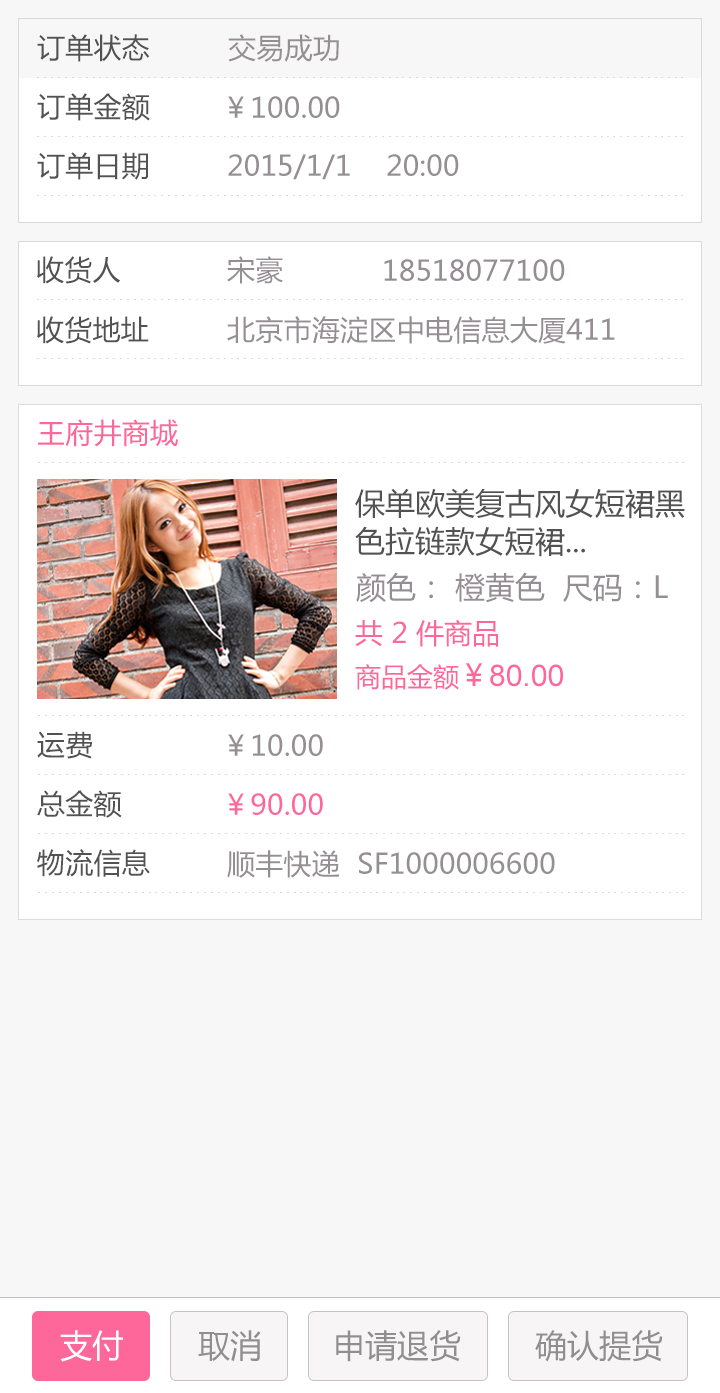
<style>
.page{position:relative;width:720px;height:1393px;background:#ffffff}
.page>*{position:absolute;margin:0}
.t1{font:28px "MicrosoftYaHei";letter-spacing:0.01em;color:#525252}
.t2{font:28px "MicrosoftYaHei";letter-spacing:0.01em;color:#958f93}
.t3{font:28px "MicrosoftYaHei";letter-spacing:0.01em;color:#fd679a}
.t4{font:30px/38px "MicrosoftYaHei";color:#525252}
.t5{font:30px "MicrosoftYaHei";color:#958f93}
.t6{font:28px "MicrosoftYaHei";color:#fd679a}
.t7{font:30px "ArialMT";color:#fd679a}
.t8{font:26px "MicrosoftYaHei";color:#fd679a}
.t9{font:30px "MicrosoftYaHei";color:#fd679a}
.t10{font:32px "MicrosoftYaHei";color:#ffffff}
.t11{font:32px "MicrosoftYaHei";color:#8f8f8f}
</style>
<div class="page">
<p class="t1" style="left:37px;top:34px;width:113px;height:28px">订单状态</p>
<p class="t2" style="left:228px;top:34px;width:111px;height:28px">交易成功</p>
<p class="t1" style="left:37px;top:93px;width:113px;height:28px">订单金额</p>
<p class="t2" style="left:228px;top:96px;width:112px;height:22px">￥100.00</p>
<p class="t1" style="left:37px;top:152px;width:111px;height:28px">订单日期</p>
<p class="t2" style="left:228px;top:154px;width:231px;height:26px">2015/1/1    20:00</p>
<p class="t1" style="left:37px;top:256px;width:84px;height:28px">收货人</p>
<p class="t2" style="left:227px;top:256px;width:56px;height:28px">宋豪</p>
<p class="t2" style="left:384px;top:259px;width:181px;height:22px">18518077100</p>
<p class="t1" style="left:37px;top:316px;width:112px;height:28px">收货地址</p>
<p class="t2" style="left:227px;top:316px;width:388px;height:28px">北京市海淀区中电信息大厦411</p>
<p class="t3" style="left:38px;top:419px;width:140px;height:28px">王府井商城</p>
<p class="t4" style="left:355px;top:488px;width:330px;height:69px">保单欧美复古风女短裙黑<br>色拉链款女短裙...</p>
<p class="t5" style="left:356px;top:572px;width:312px;height:31px">颜色： 橙黄色  尺码：L</p>
<p class="t6" style="left:355px;top:619px;width:143px;height:28px">共 2 件商品</p>
<p class="t7" style="left:355px;top:663px;width:208px;height:27px"><span class="t8">商品金额</span><span class="t9">￥</span>80.00</p>
<p class="t1" style="left:37px;top:731px;width:55px;height:28px">运费</p>
<p class="t2" style="left:228px;top:734px;width:95px;height:22px">￥10.00</p>
<p class="t1" style="left:37px;top:790px;width:85px;height:28px">总金额</p>
<p class="t3" style="left:228px;top:793px;width:95px;height:22px">￥90.00</p>
<p class="t1" style="left:37px;top:849px;width:113px;height:28px">物流信息</p>
<p class="t2" style="left:227px;top:850px;width:328px;height:28px">顺丰快递  SF1000006600</p>
<p class="t10" style="left:60px;top:1330px;width:63px;height:32px">支付</p>
<p class="t11" style="left:198px;top:1330px;width:63px;height:31px">取消</p>
<p class="t11" style="left:336px;top:1330px;width:125px;height:32px">申请退货</p>
<p class="t11" style="left:535px;top:1330px;width:128px;height:32px">确认提货</p>
</div>
